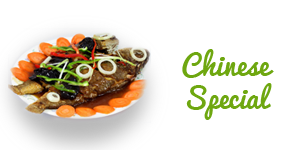
<style>
.page{position:relative;width:300px;height:150px;background:#ffffff}
.page>*{position:absolute;margin:0}
.t1{font:27.8px "Pacifico";color:#6ea710}
</style>
<div class="page">
<p class="t1" style="left:182px;top:49px;width:92px;height:71px;text-align:center">Chinese<br>Special</p>
</div>
